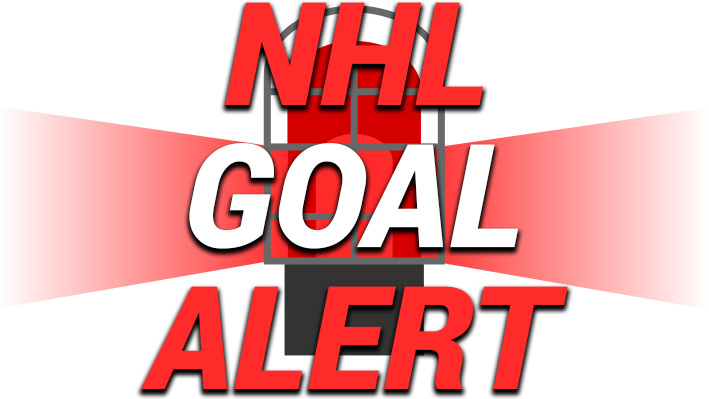
<style>
.page{position:relative;width:709px;height:399px;background:#ffffff}
.page>*{position:absolute;margin:0}
.t1{font:144px "Franko-BlackItalic";color:#ff2a2a}
.t2{font:144px "Franko-BlackItalic";color:#ffffff}
</style>
<div class="page">
<p class="t1" style="left:225px;top:2px;width:259px;height:103px">NHL</p>
<p class="t2" style="left:189px;top:143px;width:330px;height:106px">GOAL</p>
<p class="t1" style="left:141px;top:286px;width:427px;height:103px">ALERT</p>
</div>
